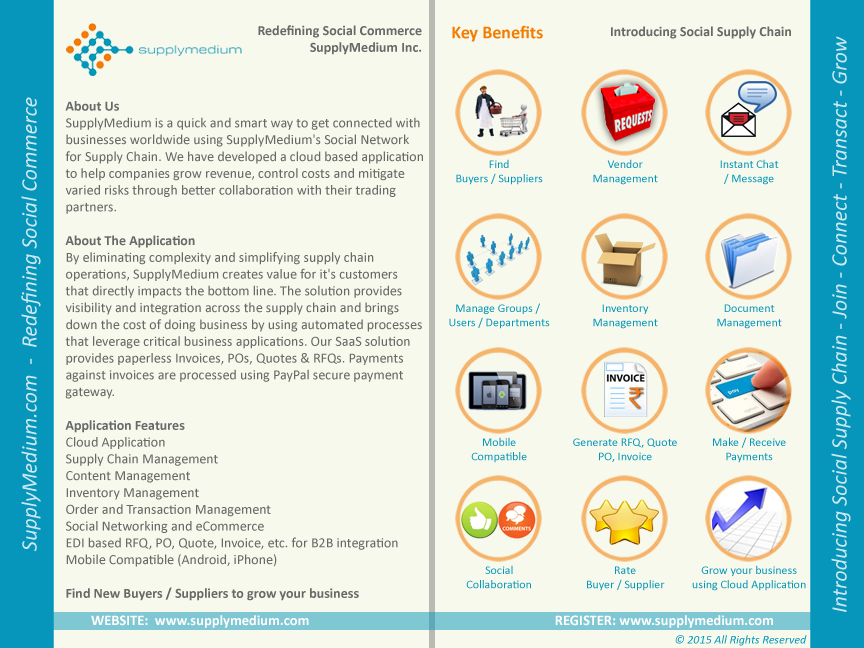
<style>
.page{position:relative;width:864px;height:648px;background:#f7f9ec}
.page>*{position:absolute;margin:0}
.t1{font:14px "Calibri-Bold";color:#696969}
.t2{font:18px "Calibri-Bold";color:#f37d02}
.t3{font:22px "Calibri-Italic";color:#cde8ef}
.t4{font:14px "Calibri";color:#696969}
.t5{font:12px "Calibri";color:#0696bb}
.t6{font:14.5px "Calibri-Bold";color:#ffffff}
.t7{font:12px "Calibri-Italic";color:#0696bb}
</style>
<div class="page">
<p class="t1" style="left:258px;top:25px;width:164px;height:30px;text-align:right">Redefining Social Commerce<br>SupplyMedium Inc.</p>
<p class="t2" style="left:452px;top:25px;width:91px;height:17px">Key Benefits</p>
<p class="t1" style="left:611px;top:26px;width:180px;height:13px">Introducing Social Supply Chain</p>
<p class="t3" style="left:831px;top:36px;width:20px;height:576px;rotate:-90deg">Introducing Social Supply Chain - Join - Connect - Transact - Grow</p>
<p class="t3" style="left:21px;top:97px;width:20px;height:454px;rotate:-90deg">SupplyMedium.com  -  Redefining Social Commerce</p>
<p class="t4" style="left:65px;top:101px;width:358px;height:500px"><span class="t1">About Us<br></span>SupplyMedium is a quick and smart way to get connected with <br>businesses worldwide using SupplyMedium's Social Network <br>for Supply Chain. We have developed a cloud based application<br>to help companies grow revenue, control costs and mitigate <br>varied risks through better collaboration with their trading <br>partners.<br><br><span class="t1">About The Application<br></span>By eliminating complexity and simplifying supply chain <br>operations, SupplyMedium creates value for it's customers <br>that directly impacts the bottom line. The solution provides <br>visibility and integration across the supply chain and brings <br>down the cost of doing business by using automated processes <br>that leverage critical business applications. Our SaaS solution <br>provides paperless Invoices, POs, Quotes &amp; RFQs. Payments <br>against invoices are processed using PayPal secure payment<br>gateway.<br><br><span class="t1">Application Features<br></span>Cloud Application<br>Supply Chain Management<br>Content Management<br>Inventory Management<br>Order and Transaction Management<br>Social Networking and eCommerce<br>EDI based RFQ, PO, Quote, Invoice, etc. for B2B integration<br>Mobile Compatible (Android, iPhone)<br><br><span class="t1">Find New Buyers / Suppliers to grow your business</span></p>
<p class="t5" style="left:456px;top:159px;width:87px;height:26px;text-align:center">Find<br>Buyers / Suppliers</p>
<p class="t5" style="left:593px;top:159px;width:65px;height:26px;text-align:center">Vendor<br>Management</p>
<p class="t5" style="left:720px;top:159px;width:59px;height:26px;text-align:center">Instant Chat<br>/ Message</p>
<p class="t5" style="left:449px;top:303px;width:101px;height:26px;text-align:center">Manage Groups / <br>Users / Departments</p>
<p class="t5" style="left:593px;top:304px;width:65px;height:25px;text-align:center">Inventory<br>Management</p>
<p class="t5" style="left:717px;top:304px;width:65px;height:25px;text-align:center">Document<br>Management</p>
<p class="t5" style="left:471px;top:437px;width:56px;height:26px;text-align:center">Mobile<br>Compatible</p>
<p class="t5" style="left:573px;top:438px;width:104px;height:24px;text-align:center">Generate RFQ, Quote<br>PO, Invoice</p>
<p class="t5" style="left:713px;top:437px;width:73px;height:26px;text-align:center">Make / Receive<br>Payments</p>
<p class="t5" style="left:466px;top:565px;width:65px;height:24px;text-align:center">Social<br>Collaboration</p>
<p class="t5" style="left:587px;top:566px;width:78px;height:25px;text-align:center">Rate<br>Buyer / Supplier</p>
<p class="t5" style="left:692px;top:565px;width:114px;height:26px;text-align:center">Grow your business<br>using Cloud Application</p>
<p class="t6" style="left:91px;top:615px;width:682px;height:13px">WEBSITE:  www.supplymedium.com                                                                           REGISTER: www.supplymedium.com</p>
<p class="t7" style="left:675px;top:635px;width:132px;height:11px">© 2015 All Rights Reserved</p>
</div>
